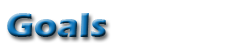
<style>
.page{position:relative;width:250px;height:50px;background:#ffffff}
.page>*{position:absolute;margin:0}
.t1{font:36px "ErasITC-Bold"}
</style>
<div class="page">
<p class="t1" style="left:7px;top:13px;width:99px;height:24px">Goals</p>
</div>
